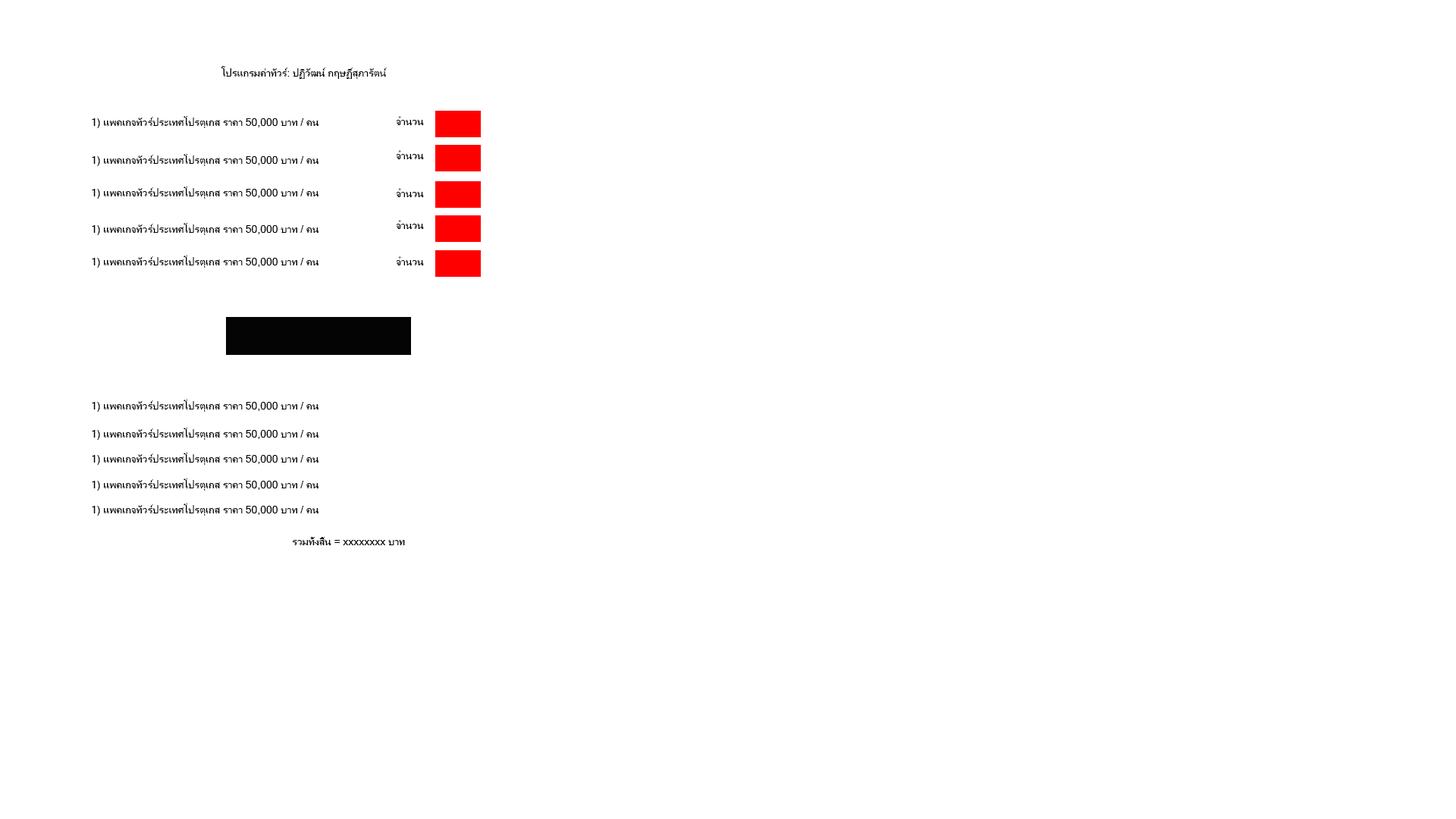
<style>
.page{position:relative;width:1456px;height:819px;background:#ffffff}
.page>*{position:absolute;margin:0}
.t1{font:10.6px "MicrosoftSansSerif";color:#000000}
</style>
<div class="page">
<p class="t1" style="left:221px;top:66px;width:166px;height:13px">โปรแกรมค่าทัวร์: ปฏิวัฒน์ กฤษฏิ์สุภารัตน์</p>
<p class="t1" style="left:92px;top:116px;width:227px;height:12px">1) แพคเกจทัวร์ประเทศโปรตุเกส ราคา 50,000 บาท / คน</p>
<p class="t1" style="left:396px;top:116px;width:28px;height:9px">จำนวน</p>
<p class="t1" style="left:92px;top:154px;width:227px;height:12px">1) แพคเกจทัวร์ประเทศโปรตุเกส ราคา 50,000 บาท / คน</p>
<p class="t1" style="left:396px;top:150px;width:28px;height:9px">จำนวน</p>
<p class="t1" style="left:92px;top:187px;width:227px;height:12px">1) แพคเกจทัวร์ประเทศโปรตุเกส ราคา 50,000 บาท / คน</p>
<p class="t1" style="left:396px;top:188px;width:28px;height:9px">จำนวน</p>
<p class="t1" style="left:396px;top:220px;width:28px;height:9px">จำนวน</p>
<p class="t1" style="left:92px;top:223px;width:227px;height:12px">1) แพคเกจทัวร์ประเทศโปรตุเกส ราคา 50,000 บาท / คน</p>
<p class="t1" style="left:92px;top:256px;width:227px;height:12px">1) แพคเกจทัวร์ประเทศโปรตุเกส ราคา 50,000 บาท / คน</p>
<p class="t1" style="left:396px;top:256px;width:28px;height:9px">จำนวน</p>
<p class="t1" style="left:92px;top:400px;width:227px;height:12px">1) แพคเกจทัวร์ประเทศโปรตุเกส ราคา 50,000 บาท / คน</p>
<p class="t1" style="left:92px;top:428px;width:227px;height:12px">1) แพคเกจทัวร์ประเทศโปรตุเกส ราคา 50,000 บาท / คน</p>
<p class="t1" style="left:92px;top:453px;width:227px;height:12px">1) แพคเกจทัวร์ประเทศโปรตุเกส ราคา 50,000 บาท / คน</p>
<p class="t1" style="left:92px;top:479px;width:227px;height:12px">1) แพคเกจทัวร์ประเทศโปรตุเกส ราคา 50,000 บาท / คน</p>
<p class="t1" style="left:92px;top:504px;width:227px;height:12px">1) แพคเกจทัวร์ประเทศโปรตุเกส ราคา 50,000 บาท / คน</p>
<p class="t1" style="left:292px;top:537px;width:113px;height:8px">รวมทั้งสิ้น = xxxxxxxx บาท</p>
</div>
